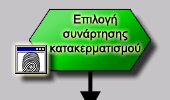
<style>
.page{position:relative;width:170px;height:100px;background:#c6c3c6}
.page>*{position:absolute;margin:0}
.t1{font:12px "ArialMT";color:#000000}
</style>
<div class="page">
<p class="t1" style="left:50px;top:14px;width:91px;height:41px;text-align:center">Επιλογή<br>συνάρτησης<br>κατακερματισμού</p>
</div>
